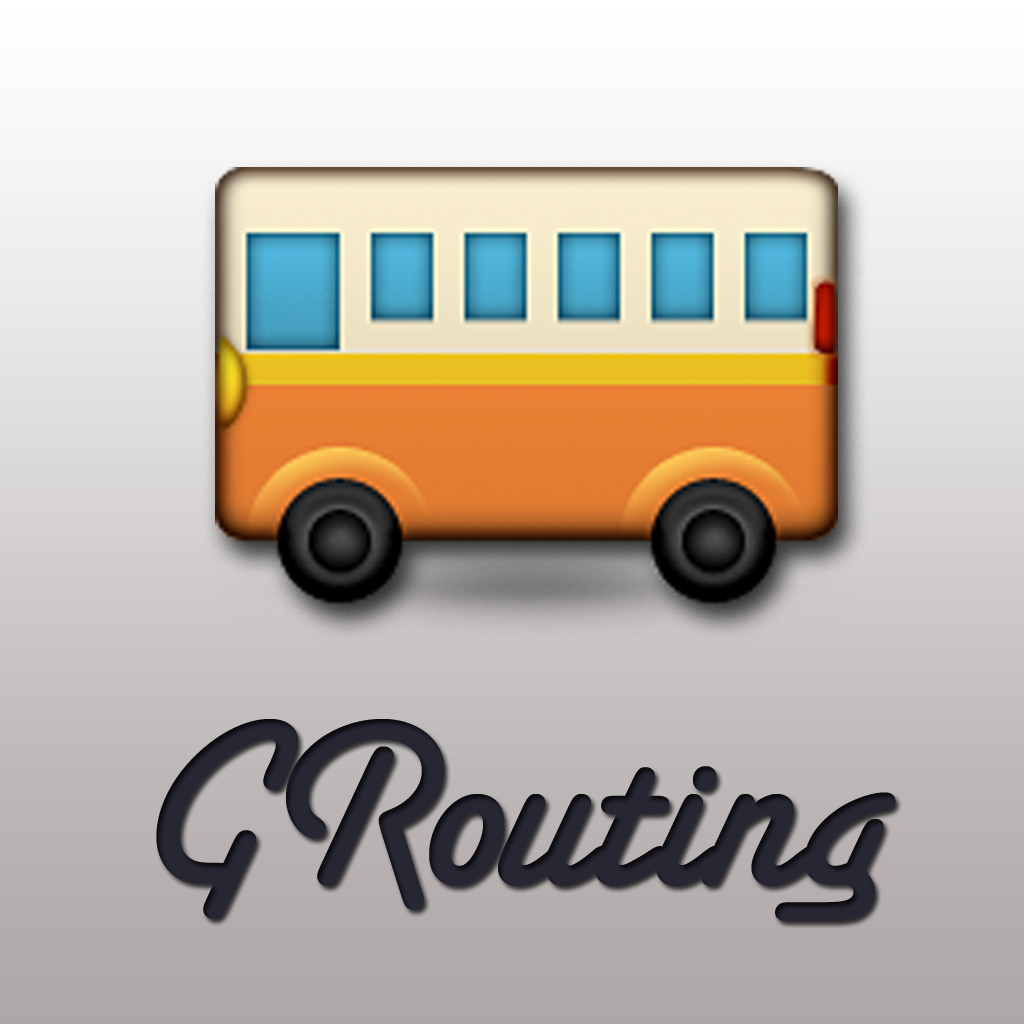
<style>
.page{position:relative;width:1024px;height:1024px}
.page>*{position:absolute;margin:0}
.t1{font:250px "SantaFeLetPlain";letter-spacing:-0.025em;color:#272734}
</style>
<div class="page">
<p class="t1" style="left:156px;top:719px;width:740px;height:202px">GRouting</p>
</div>
